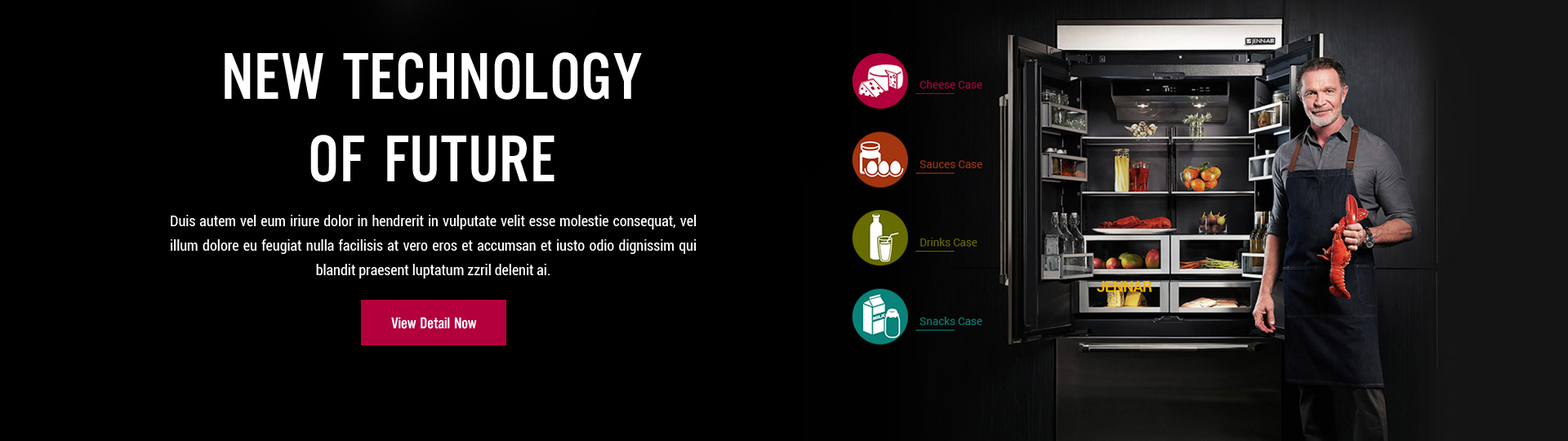
<style>
.page{position:relative;width:1568px;height:441px;background:#000000}
.page>*{position:absolute;margin:0}
.t1{font:68.6px "UTM-Alter-Gothic";letter-spacing:0.01em;color:#ffffff}
.t2{font:14.7px/24.5px "Roboto-Condensed";color:#ffffff}
.t3{font:16.3px "UTM-Alter-Gothic";letter-spacing:-0.005em;color:#ffffff}
</style>
<div class="page">
<p class="t1" style="left:225px;top:52px;width:417px;height:130px;text-align:center">NEW TECHNOLOGY<br>OF FUTURE</p>
<p class="t2" style="left:171px;top:215px;width:526px;height:63px;text-align:justify">Duis autem vel eum iriure dolor in hendrerit in vulputate velit esse molestie consequat, vel illum dolore eu feugiat nulla facilisis at vero eros et accumsan et iusto odio dignissim qui blandit praesent luptatum zzril delenit ai.</p>
<p class="t3" style="left:391px;top:317px;width:86px;height:12px">View Detail Now</p>
</div>
